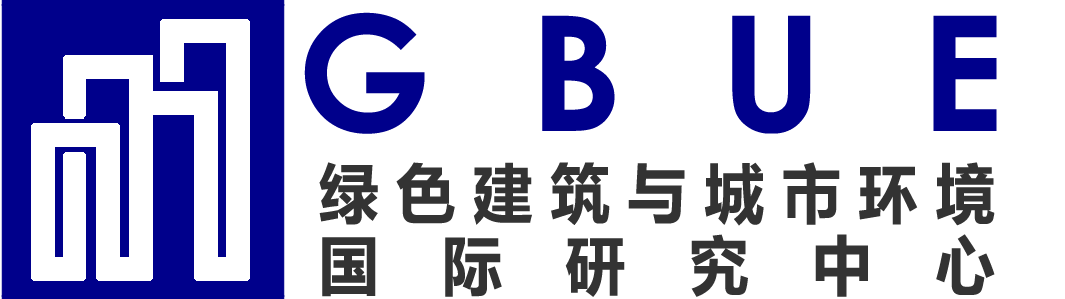
<style>
.page{position:relative;width:1065px;height:299px;background:#ffffff}
.page>*{position:absolute;margin:0}
.t1{font:160px "CenturyGothic-Bold";color:#00008b}
.t2{font:64px "MicrosoftYaHei-Bold";color:#333333;scale:0.93 1}
</style>
<div class="page">
<p class="t1" style="left:304px;top:12px;width:693px;height:122px">GBUE</p>
<p class="t2" style="left:319px;top:162px;width:676px;height:135px;text-align:justify">绿色建筑与城市环境<br>国际研究中心</p>
</div>
